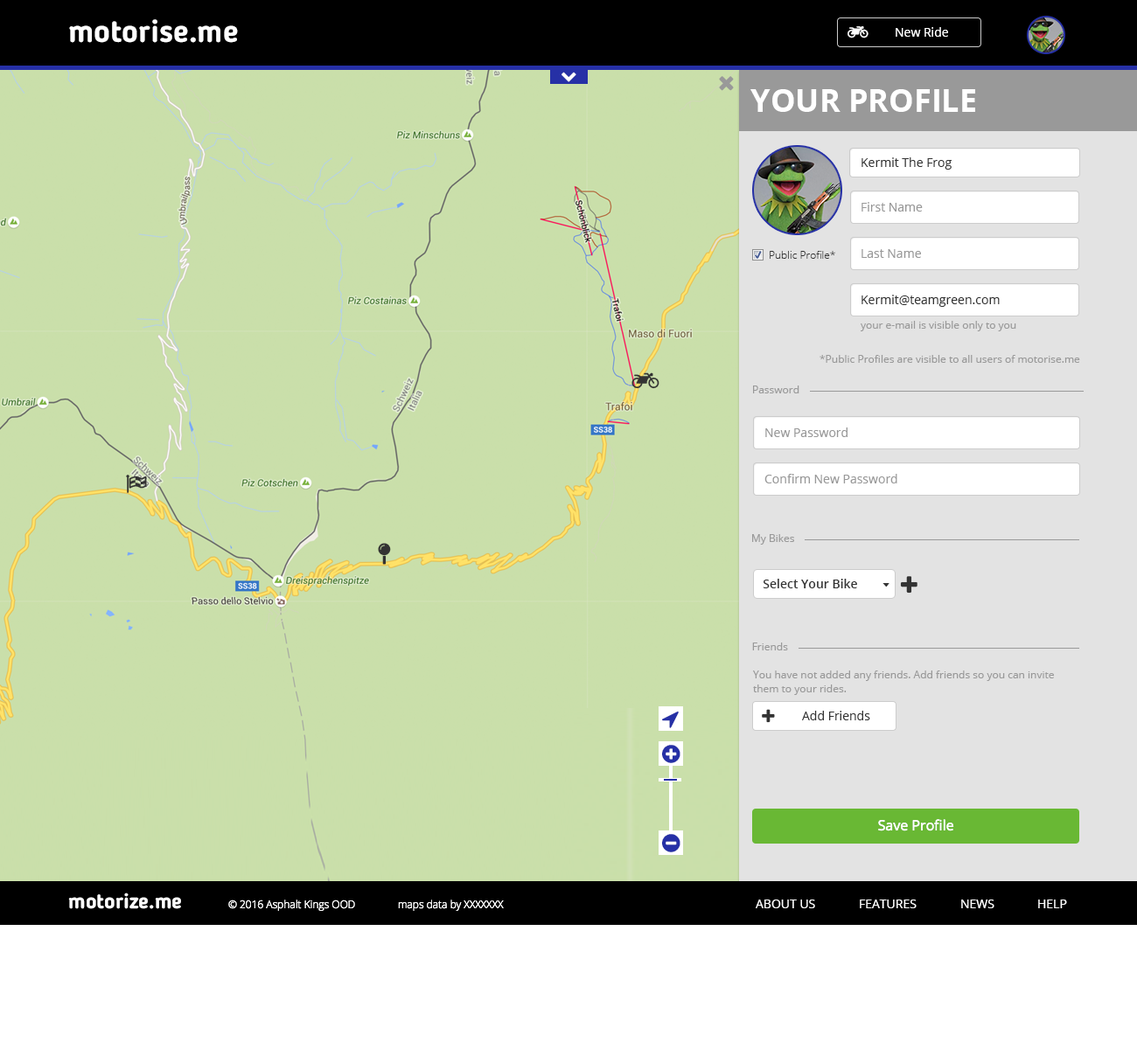
<style>
.page{position:relative;width:1137px;height:1049px;background:#cadfaa}
.page>*{position:absolute;margin:0}
.t1{font:31.5px "BloggerSans-Bold";color:#ffffff}
.t2{font:12.2px "OpenSans";color:#ffffff}
.t3{font:31.5px "OpenSans-Bold";color:#ffffff}
.t4{font:12.2px "OpenSans";color:#333333}
.t5{font:12.2px "OpenSans";color:#999999}
.t6{font:10.5px "OpenSans-Light";color:#333333}
.t7{font:10.5px "OpenSans";color:#999999}
.t8{font:12.2px "OpenSans-Semibold";color:#333333}
.t9{font:10.5px/14px "OpenSans";color:#999999}
.t10{font:14px "OpenSans";color:#ffffff}
.t11{font:21px "BloggerSans-Bold";color:#ffffff}
.t12{font:10.5px "OpenSans-Light";color:#ffffff}
</style>
<div class="page">
<p class="t1" style="left:69px;top:19px;width:169px;height:24px">motorise.me</p>
<p class="t2" style="left:895px;top:27px;width:53px;height:10px">New Ride</p>
<p class="t3" style="left:750px;top:89px;width:225px;height:23px">YOUR PROFILE</p>
<p class="t4" style="left:861px;top:157px;width:90px;height:13px">Kermit The Frog</p>
<p class="t5" style="left:861px;top:202px;width:61px;height:10px">First Name</p>
<p class="t6" style="left:769px;top:251px;width:66px;height:8px">Public Profile*</p>
<p class="t5" style="left:861px;top:249px;width:60px;height:9px">Last Name</p>
<p class="t4" style="left:861px;top:295px;width:138px;height:12px">Kermit@teamgreen.com</p>
<p class="t7" style="left:860px;top:321px;width:156px;height:10px">your e-mail is visible only to you</p>
<p class="t7" style="left:819px;top:355px;width:261px;height:8px">*Public Profiles are visible to all users of motorise.me</p>
<p class="t7" style="left:753px;top:386px;width:46px;height:7px">Password</p>
<p class="t5" style="left:765px;top:428px;width:82px;height:9px">New Password</p>
<p class="t5" style="left:764px;top:474px;width:133px;height:9px">Confirm New Password</p>
<p class="t7" style="left:752px;top:534px;width:42px;height:11px">My Bikes</p>
<p class="t8" style="left:762px;top:579px;width:95px;height:9px">Select Your Bike</p>
<p class="t7" style="left:752px;top:643px;width:36px;height:7px">Friends</p>
<p class="t9" style="left:753px;top:671px;width:301px;height:24px">You have not added any friends. Add friends so you can invite them to your rides.</p>
<p class="t4" style="left:802px;top:711px;width:68px;height:9px">Add Friends</p>
<p class="t10" style="left:878px;top:819px;width:76px;height:12px">Save Profile</p>
<p class="t11" style="left:68px;top:893px;width:113px;height:16px">motorize.me</p>
<p class="t12" style="left:228px;top:900px;width:127px;height:11px">© 2016 Asphalt Kings OOD</p>
<p class="t12" style="left:398px;top:900px;width:106px;height:11px">maps data by XXXXXXX</p>
<p class="t2" style="left:755px;top:900px;width:60px;height:8px">ABOUT US</p>
<p class="t2" style="left:859px;top:900px;width:57px;height:8px">FEATURES</p>
<p class="t2" style="left:961px;top:900px;width:33px;height:8px">NEWS</p>
<p class="t2" style="left:1038px;top:900px;width:29px;height:8px">HELP</p>
</div>
